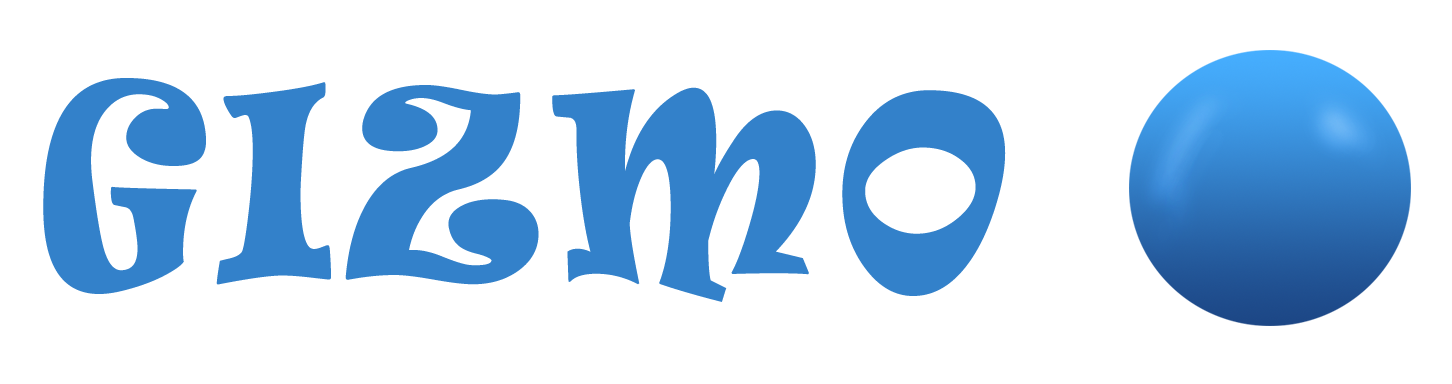
<style>
.page{position:relative;width:1452px;height:384px;background:#ffffff}
.page>*{position:absolute;margin:0}
.t1{font:250px "Ravie";letter-spacing:0.05em;color:#3381ca;font-weight:bold}
</style>
<div class="page">
<p class="t1" style="left:43px;top:78px;width:963px;height:224px">GIZMO</p>
</div>
